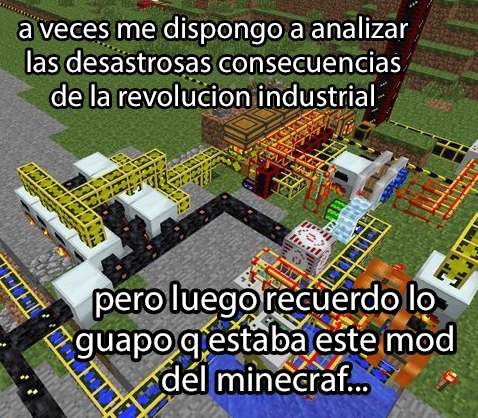
<style>
.page{position:relative;width:478px;height:418px}
.page>*{position:absolute;margin:0}
.t1{font:30.3px "MyriadPro-Regular";color:#ffffff}
.t2{font:36px "MyriadPro-Regular";color:#ffffff}
</style>
<div class="page">
<p class="t1" style="left:19px;top:16px;width:389px;height:91px;text-align:center">a veces me dispongo a analizar<br>las desastrosas consecuencias<br>de la revolucion industrial</p>
<p class="t2" style="left:76px;top:284px;width:377px;height:108px;text-align:center">pero luego recuerdo lo<br>guapo q estaba este mod<br>del minecraf...</p>
</div>
